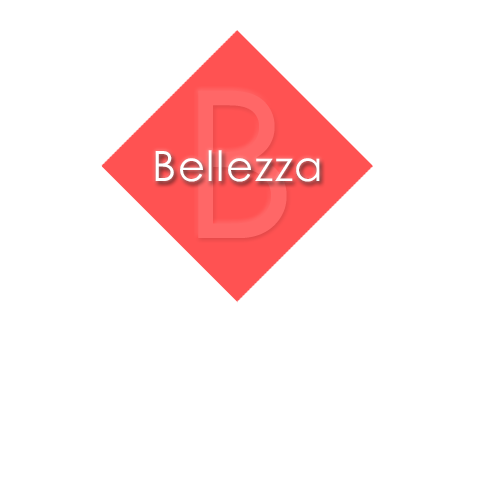
<style>
.page{position:relative;width:500px;height:500px;background:#ffffff}
.page>*{position:absolute;margin:0}
.t1{font:41.7px "CenturyGothic";letter-spacing:0.04em;color:#ffffff}
</style>
<div class="page">
<p class="t1" style="left:155px;top:150px;width:165px;height:32px">Bellezza</p>
</div>
